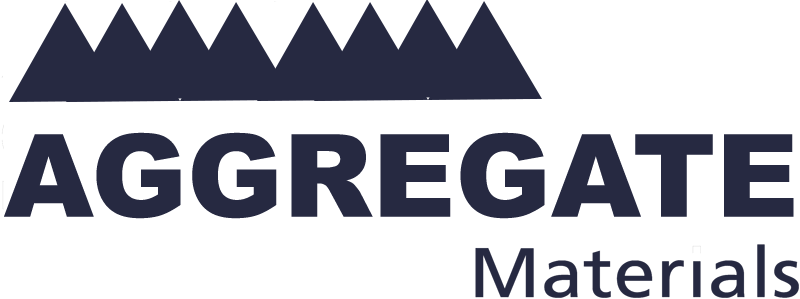
<style>
.page{position:relative;width:800px;height:299px;background:#ffffff}
.page>*{position:absolute;margin:0}
.t1{font:115px "Arial-Black";color:#262941}
</style>
<div class="page">
<p class="t1" style="left:4px;top:132px;width:790px;height:87px">AGGREGATE</p>
</div>
